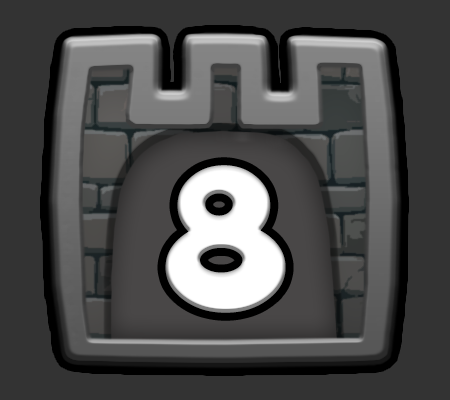
<style>
.page{position:relative;width:450px;height:400px;background:#333333}
.page>*{position:absolute;margin:0}
.t1{font:217px "Funhouse";color:#ffffff}
</style>
<div class="page">
<p class="t1" style="left:165px;top:165px;width:121px;height:148px">8</p>
</div>
